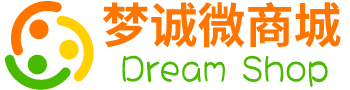
<style>
.page{position:relative;width:350px;height:90px;background:#ffffff}
.page>*{position:absolute;margin:0}
.t1{font:48px "SourceHanSansSC-Bold";color:#ff7500}
.t2{font:40px "DFGirl";color:#4aba00}
</style>
<div class="page">
<p class="t1" style="left:102px;top:2px;width:239px;height:46px">梦诚微商城</p>
<p class="t2" style="left:122px;top:55px;width:206px;height:33px">Dream Shop</p>
</div>
